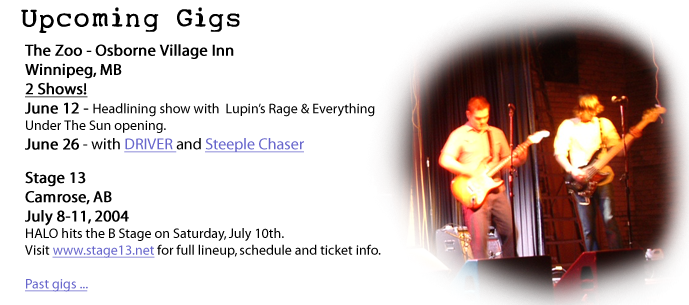
<style>
.page{position:relative;width:689px;height:305px;background:#ffffff}
.page>*{position:absolute;margin:0}
.t1{font:26px "My-type-of-font";color:#000000;font-weight:bold}
.t2{font:14px "Myriad-Roman";color:#000000}
.t3{font:16px "Myriad-Roman";color:#000000;font-weight:bold}
.t4{font:16px "Myriad-Roman";color:#000000;font-weight:bold;text-decoration:underline}
.t5{font:16px "Myriad-Roman";color:#000000}
.t6{font:16px "Myriad-Roman";color:#6766cc;text-decoration:underline}
.t7{font:14px "Myriad-Roman";color:#6766cc;text-decoration:underline}
</style>
<div class="page">
<p class="t1" style="left:21px;top:7px;width:219px;height:26px">Upcoming Gigs</p>
<p class="t2" style="left:25px;top:44px;width:356px;height:248px"><span class="t3">The Zoo - Osborne Village Inn<br>Winnipeg, MB<br></span><span class="t4">2 Shows!<br></span><span class="t3">June 12 - </span>Headlining show with  Lupin’s Rage &amp; Everything <br>Under The Sun opening.<br><span class="t3">June 26</span><span class="t5"> - with </span><span class="t6">DRIVER </span><span class="t5">and </span><span class="t6">Steeple Chaser<br><br></span><span class="t3">Stage 13<br>Camrose, AB<br>July 8-11, 2004<br></span>HALO hits the B Stage on Saturday, July 10th.<br>Visit <span class="t7">www.stage13.net</span> for full lineup, schedule and ticket info.<br><br><span class="t7">Past gigs ...</span></p>
</div>
